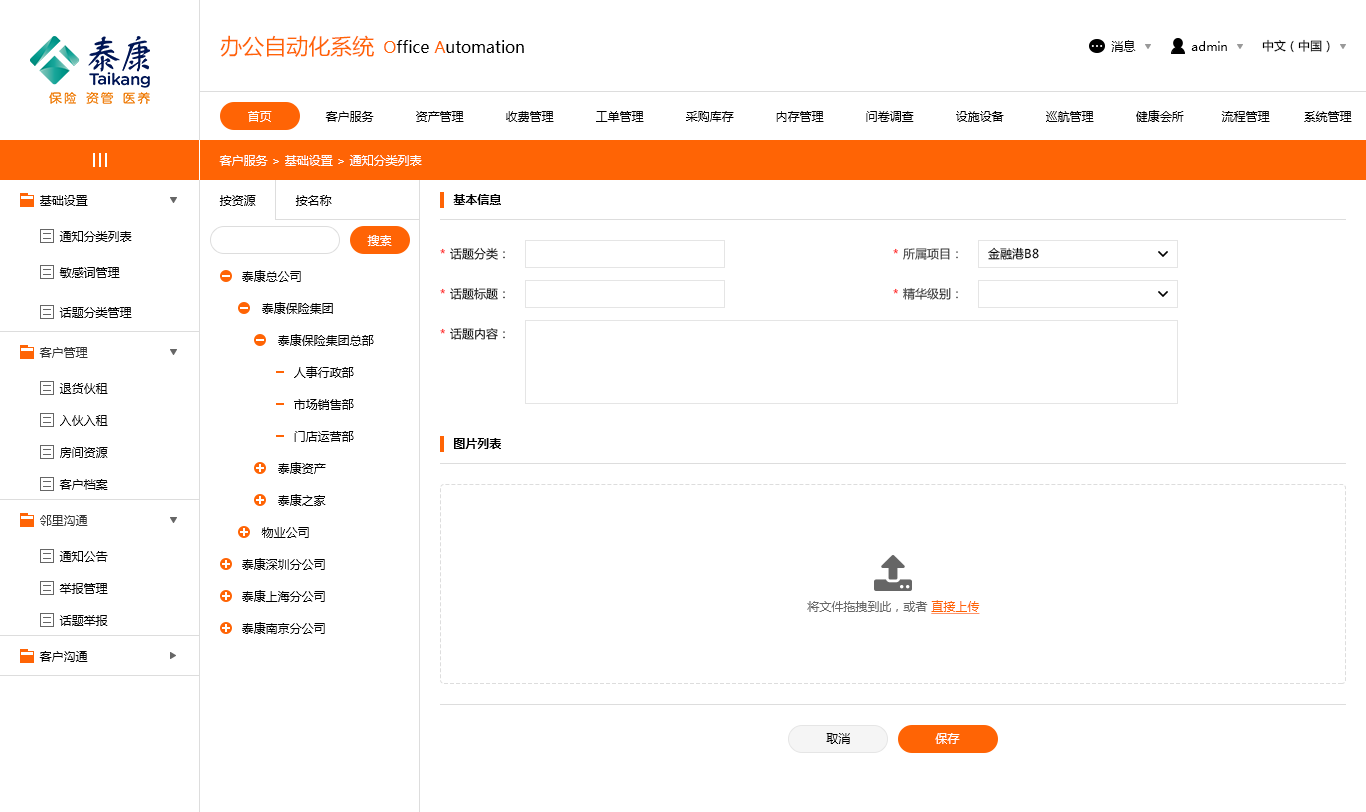
<style>
.page{position:relative;width:1366px;height:812px;background:#ffffff}
.page>*{position:absolute;margin:0}
.t1{font:22px "MicrosoftYaHei";color:#ff6405}
.t2{font:16px "MicrosoftYaHei";color:#000000}
.t3{font:16px "MicrosoftYaHei";color:#ff6405}
.t4{font:12px "MicrosoftYaHei";color:#010101}
.t5{font:12px "MicrosoftYaHei";color:#000000}
.t6{font:12px "MicrosoftYaHei";color:#ffffff}
.t7{font:12px "MicrosoftYaHei-Bold";color:#000000}
.t8{font:12px/40px "MicrosoftYaHei";color:#000000}
.t9{font:12px/40px "MicrosoftYaHei";color:#333333}
.t10{font:12px/40px "MicrosoftYaHei";color:#ff0000}
.t11{font:12px/32px "MicrosoftYaHei";color:#000000}
.t12{font:12px "MicrosoftYaHei";color:#333333}
.t13{font:12px "MicrosoftYaHei";color:#666666}
.t14{font:12px "MicrosoftYaHei";color:#ff6405;text-decoration:underline}
</style>
<div class="page">
<p class="t1" style="left:220px;top:35px;width:154px;height:22px">办公自动化系统</p>
<p class="t2" style="left:384px;top:40px;width:140px;height:13px"><span class="t3">O</span>ffice<span class="t3"> A</span>utomation</p>
<p class="t4" style="left:1111px;top:40px;width:25px;height:12px">消息</p>
<p class="t5" style="left:1191px;top:41px;width:36px;height:10px">admin</p>
<p class="t5" style="left:1262px;top:39px;width:68px;height:14px">中文（中国）</p>
<p class="t6" style="left:248px;top:111px;width:24px;height:11px">首页</p>
<p class="t5" style="left:325px;top:111px;width:49px;height:11px">客户服务</p>
<p class="t5" style="left:416px;top:111px;width:48px;height:11px">资产管理</p>
<p class="t5" style="left:506px;top:111px;width:48px;height:11px">收费管理</p>
<p class="t5" style="left:596px;top:111px;width:48px;height:11px">工单管理</p>
<p class="t5" style="left:686px;top:111px;width:48px;height:11px">采购库存</p>
<p class="t5" style="left:776px;top:111px;width:48px;height:11px">内存管理</p>
<p class="t5" style="left:866px;top:111px;width:48px;height:11px">问卷调查</p>
<p class="t5" style="left:956px;top:111px;width:48px;height:11px">设施设备</p>
<p class="t5" style="left:1046px;top:111px;width:48px;height:11px">巡航管理</p>
<p class="t5" style="left:1136px;top:110px;width:48px;height:12px">健康会所</p>
<p class="t5" style="left:1221px;top:111px;width:49px;height:11px">流程管理</p>
<p class="t5" style="left:1304px;top:111px;width:48px;height:11px">系统管理</p>
<p class="t6" style="left:219px;top:155px;width:203px;height:11px">客户服务 &gt; 基础设置 &gt; 通知分类列表</p>
<p class="t4" style="left:40px;top:195px;width:48px;height:11px">基础设置</p>
<p class="t5" style="left:219px;top:195px;width:37px;height:11px">按资源</p>
<p class="t5" style="left:295px;top:195px;width:37px;height:11px">按名称</p>
<p class="t7" style="left:453px;top:194px;width:48px;height:11px">基本信息</p>
<p class="t5" style="left:59px;top:231px;width:73px;height:11px">通知分类列表</p>
<p class="t6" style="left:367px;top:235px;width:25px;height:11px">搜索</p>
<p class="t8" style="left:440px;top:247px;width:65px;height:93px;text-align:right">* 话题分类：<br>* 话题标题：<br>* 话题内容：</p>
<p class="t9" style="left:893px;top:248px;width:65px;height:52px;text-align:right"><span class="t10">* </span>所属项目：<br><span class="t10">* </span>精华级别：</p>
<p class="t5" style="left:988px;top:247px;width:51px;height:13px">金融港B8</p>
<p class="t5" style="left:59px;top:267px;width:61px;height:11px">敏感词管理</p>
<p class="t11" style="left:242px;top:270px;width:132px;height:364px">泰康总公司<br>     泰康保险集团 <br>         泰康保险集团总部<br>             人事行政部<br>             市场销售部<br>             门店运营部<br>         泰康资产<br>         泰康之家<br>     物业公司<br>泰康深圳分公司<br>泰康上海分公司<br>泰康南京分公司</p>
<p class="t5" style="left:59px;top:307px;width:73px;height:11px">话题分类管理</p>
<p class="t12" style="left:39px;top:347px;width:49px;height:11px">客户管理</p>
<p class="t4" style="left:59px;top:383px;width:49px;height:11px">退货伙租</p>
<p class="t4" style="left:60px;top:415px;width:48px;height:11px">入伙入租</p>
<p class="t7" style="left:454px;top:438px;width:47px;height:11px">图片列表</p>
<p class="t4" style="left:60px;top:447px;width:48px;height:11px">房间资源</p>
<p class="t4" style="left:59px;top:479px;width:49px;height:11px">客户档案</p>
<p class="t12" style="left:40px;top:515px;width:48px;height:11px">邻里沟通</p>
<p class="t5" style="left:59px;top:551px;width:49px;height:11px">通知公告</p>
<p class="t4" style="left:59px;top:583px;width:49px;height:11px">举报管理</p>
<p class="t13" style="left:807px;top:600px;width:173px;height:14px">将文件拖拽到此，或者 <span class="t14">直接上传</span></p>
<p class="t5" style="left:59px;top:615px;width:49px;height:11px">话题举报</p>
<p class="t5" style="left:39px;top:651px;width:49px;height:11px">客户沟通</p>
<p class="t4" style="left:826px;top:733px;width:24px;height:11px">取消</p>
<p class="t6" style="left:935px;top:733px;width:25px;height:11px">保存</p>
</div>
